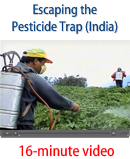
<style>
.page{position:relative;width:130px;height:159px;background:#ffffff}
.page>*{position:absolute;margin:0}
.t1{font:14px "MyriadWebPro-Condensed";color:#09407e}
.t2{font:16px "MyriadWebPro-Condensed";color:#fd0107}
</style>
<div class="page">
<p class="t1" style="left:12px;top:4px;width:106px;height:30px;text-align:center">Escaping the<br>Pesticide Trap (India)</p>
<p class="t2" style="left:19px;top:144px;width:96px;height:13px">16-minute video</p>
</div>
